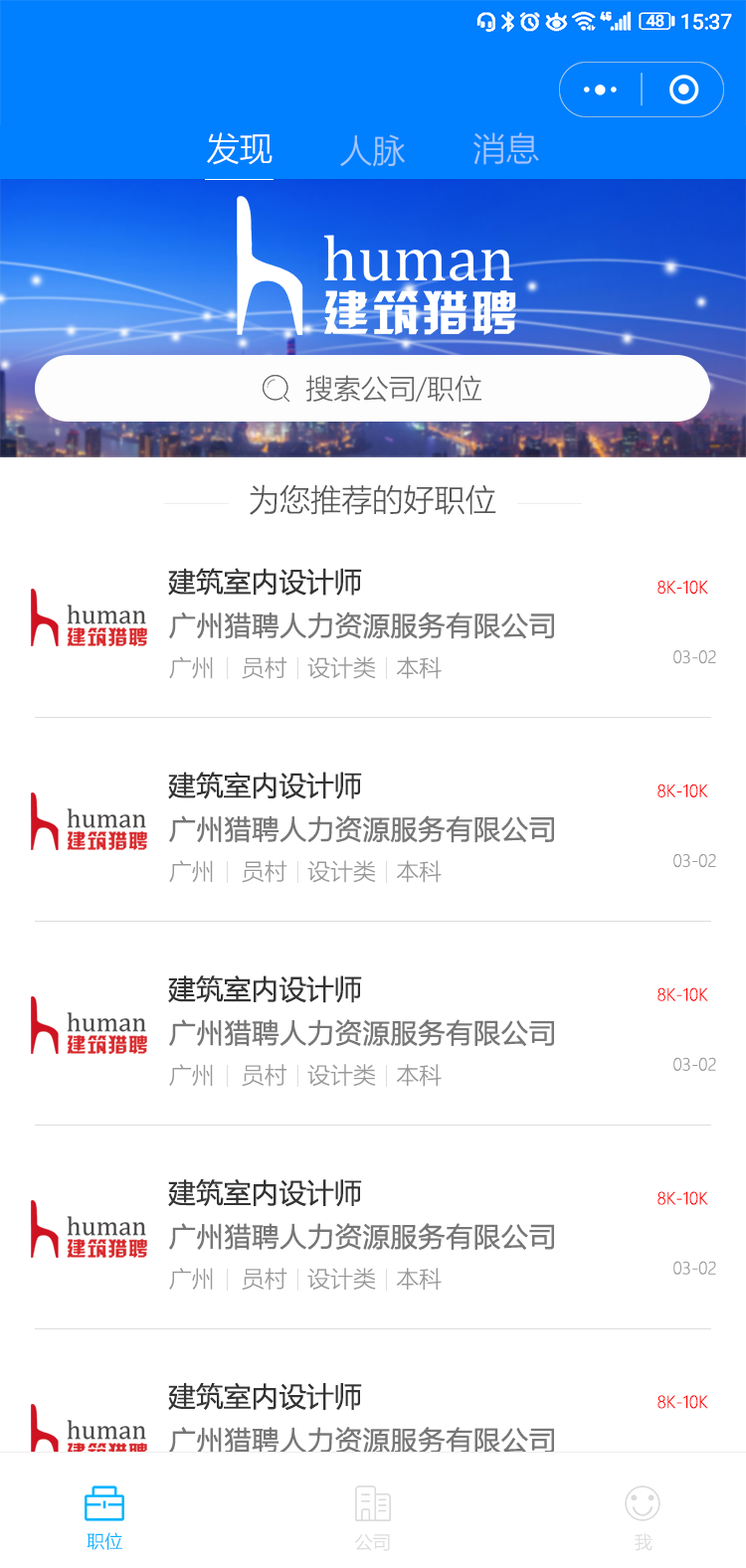
<style>
.page{position:relative;width:746px;height:1568px;background:#ffffff}
.page>*{position:absolute;margin:0}
.t1{font:33.1px "MicrosoftYaHeiLight";color:#ffffff}
.t2{font:33.1px "MicrosoftYaHeiLight";color:#a3c6ff}
.t3{font:27.6px "MicrosoftYaHeiLight";color:#666666}
.t4{font:31.1px "MicrosoftYaHeiLight";color:#555555}
.t5{font:27.6px "MicrosoftYaHei";color:#333333}
.t6{font:16.6px "MicrosoftYaHeiLight";color:#ff0000}
.t7{font:26.9px "MicrosoftYaHeiLight";color:#777777;font-weight:bold}
.t8{font:16.6px "MicrosoftYaHeiLight";color:#999999}
.t9{font:22.8px "MicrosoftYaHeiLight";color:#999999}
.t10{font:18px "MicrosoftYaHeiLight";color:#00b3ff}
.t11{font:18px "MicrosoftYaHeiLight";color:#dbdbdb}
</style>
<div class="page">
<p class="t1" style="left:207px;top:132px;width:65px;height:33px">发现</p>
<p class="t2" style="left:340px;top:134px;width:65px;height:33px">人脉</p>
<p class="t2" style="left:473px;top:132px;width:66px;height:33px">消息</p>
<p class="t3" style="left:306px;top:375px;width:175px;height:27px">搜索公司/职位</p>
<p class="t4" style="left:250px;top:484px;width:246px;height:31px">为您推荐的好职位</p>
<p class="t5" style="left:168px;top:568px;width:194px;height:28px">建筑室内设计师</p>
<p class="t6" style="left:657px;top:580px;width:51px;height:15px">8K-10K</p>
<p class="t7" style="left:169px;top:611px;width:385px;height:28px">广州猎聘人力资源服务有限公司</p>
<p class="t8" style="left:673px;top:650px;width:43px;height:14px">03-02</p>
<p class="t9" style="left:169px;top:656px;width:272px;height:23px">广州    员村   设计类   本科</p>
<p class="t5" style="left:168px;top:772px;width:194px;height:27px">建筑室内设计师</p>
<p class="t6" style="left:657px;top:784px;width:51px;height:13px">8K-10K</p>
<p class="t7" style="left:169px;top:815px;width:385px;height:28px">广州猎聘人力资源服务有限公司</p>
<p class="t8" style="left:673px;top:854px;width:43px;height:14px">03-02</p>
<p class="t9" style="left:169px;top:860px;width:272px;height:23px">广州    员村   设计类   本科</p>
<p class="t5" style="left:168px;top:975px;width:194px;height:28px">建筑室内设计师</p>
<p class="t6" style="left:657px;top:987px;width:51px;height:14px">8K-10K</p>
<p class="t7" style="left:169px;top:1019px;width:385px;height:28px">广州猎聘人力资源服务有限公司</p>
<p class="t8" style="left:673px;top:1057px;width:43px;height:14px">03-02</p>
<p class="t9" style="left:169px;top:1064px;width:272px;height:23px">广州    员村   设计类   本科</p>
<p class="t5" style="left:168px;top:1178px;width:194px;height:29px">建筑室内设计师</p>
<p class="t6" style="left:657px;top:1191px;width:51px;height:14px">8K-10K</p>
<p class="t7" style="left:169px;top:1223px;width:385px;height:27px">广州猎聘人力资源服务有限公司</p>
<p class="t8" style="left:673px;top:1261px;width:43px;height:14px">03-02</p>
<p class="t9" style="left:169px;top:1268px;width:272px;height:22px">广州    员村   设计类   本科</p>
<p class="t5" style="left:168px;top:1382px;width:194px;height:29px">建筑室内设计师</p>
<p class="t6" style="left:657px;top:1395px;width:51px;height:14px">8K-10K</p>
<p class="t7" style="left:169px;top:1427px;width:385px;height:27px">广州猎聘人力资源服务有限公司</p>
<p class="t10" style="left:87px;top:1532px;width:35px;height:18px">职位</p>
<p class="t11" style="left:355px;top:1534px;width:35px;height:17px">公司</p>
<p class="t11" style="left:634px;top:1533px;width:18px;height:18px">我</p>
</div>
